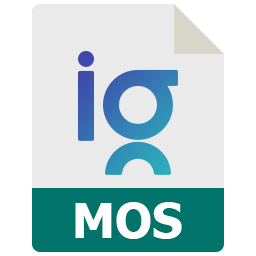
<style>
.page{position:relative;width:256px;height:256px;background:#eaeaea}
.page>*{position:absolute;margin:0}
.t1{font:48px "Tahoma-Bold";color:#ffffff}
</style>
<div class="page">
<p class="t1" style="left:75px;top:202px;width:107px;height:37px">MOS</p>
</div>
